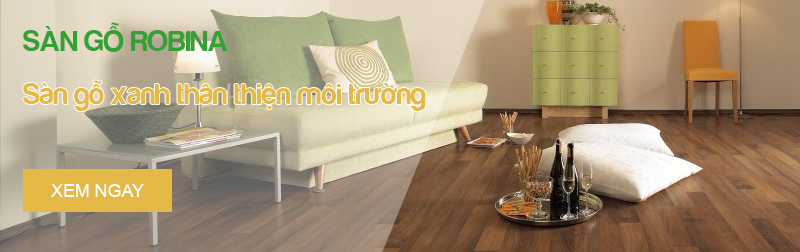
<style>
.page{position:relative;width:800px;height:252px}
.page>*{position:absolute;margin:0}
.t1{font:30px "FS-Harabara";color:#35a135}
.t2{font:30px "FS-Harabara";color:#e5b946}
.t3{font:17.8px "ArialMT";color:#ffffff}
</style>
<div class="page">
<p class="t1" style="left:23px;top:22px;width:205px;height:30px">SÀN GỖ ROBINA</p>
<p class="t2" style="left:23px;top:80px;width:403px;height:31px">Sàn gỗ xanh thân thiện môi trường</p>
<p class="t3" style="left:51px;top:184px;width:93px;height:13px">XEM NGAY</p>
</div>
